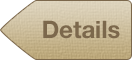
<style>
.page{position:relative;width:132px;height:60px}
.page>*{position:absolute;margin:0}
.t1{font:24px "HelveticaNeue-Bold";color:#7c684c}
</style>
<div class="page">
<p class="t1" style="left:43px;top:20px;width:77px;height:19px">Details</p>
</div>
